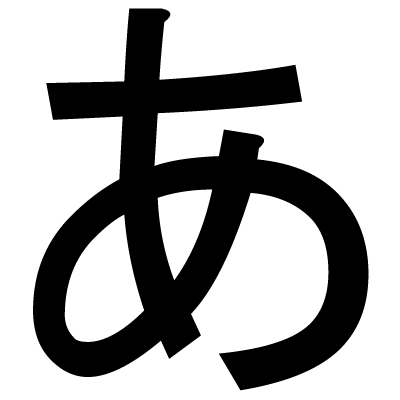
<style>
.page{position:relative;width:400px;height:400px;background:#ffffff}
.page>*{position:absolute;margin:0}
.t1{font:424.8px "MS-PGothic";color:#000000}
</style>
<div class="page">
<p class="t1" style="left:33px;top:8px;width:336px;height:383px">あ</p>
</div>
